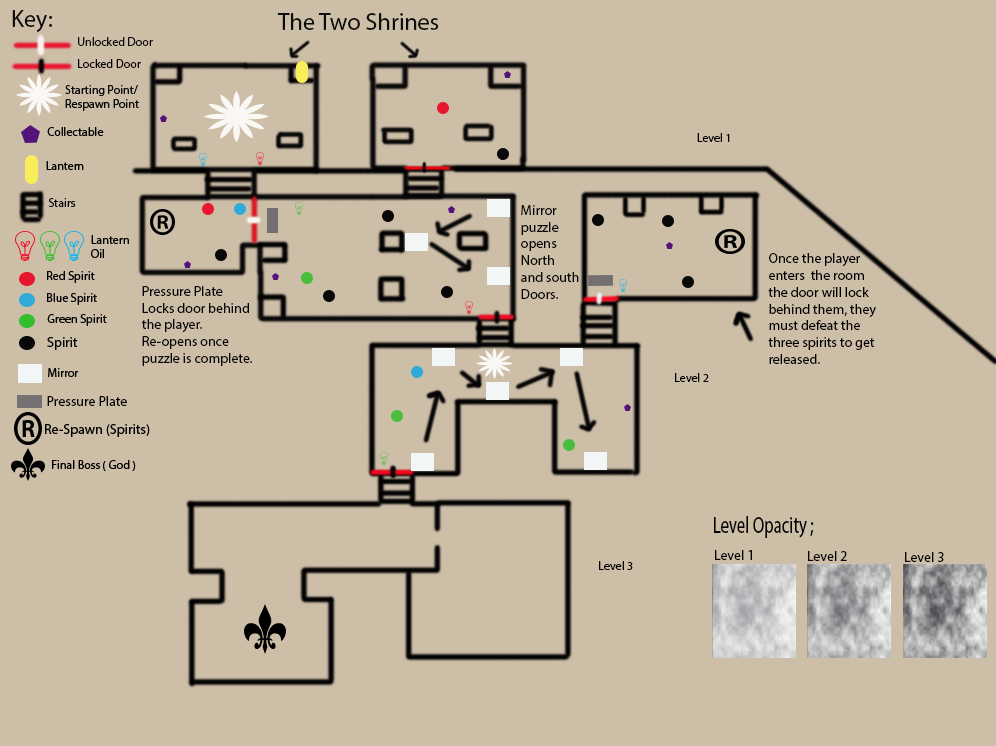
<style>
.page{position:relative;width:996px;height:746px;background:#cdbea8}
.page>*{position:absolute;margin:0}
.t1{font:24px "MyriadPro-Regular";color:#0c0c0c}
.t2{font:12px "MyriadPro-Regular";color:#0c0c0c}
.t3{font:12px "MyriadPro-Regular";color:#040001}
.t4{font:12px "MyriadPro-Regular";color:#000000}
.t5{font:14px "MyriadPro-Regular";color:#040404}
.t6{font:14px "MyriadPro-Regular";color:#000000}
.t7{font:23.2px "MyriadPro-Regular";color:#030303;scale:0.72 1}
.t8{font:14px "MyriadPro-Regular";color:#030303}
</style>
<div class="page">
<p class="t1" style="left:12px;top:10px;width:41px;height:22px">Key:</p>
<p class="t1" style="left:277px;top:13px;width:162px;height:17px">The Two Shrines</p>
<p class="t2" style="left:78px;top:37px;width:75px;height:9px">Unlocked Door</p>
<p class="t3" style="left:78px;top:59px;width:63px;height:9px">Locked Door</p>
<p class="t4" style="left:697px;top:133px;width:33px;height:9px">Level 1</p>
<p class="t3" style="left:48px;top:198px;width:28px;height:9px">Stairs</p>
<p class="t5" style="left:521px;top:205px;width:58px;height:94px">Mirror<br>puzzle <br>opens <br>North <br>and south<br>Doors.</p>
<p class="t6" style="left:768px;top:253px;width:108px;height:111px">Once the player<br>enters  the room <br>the door will lock <br>behind them, they<br>must defeat the <br>three spirits to get<br>released.</p>
<p class="t5" style="left:142px;top:286px;width:110px;height:80px">Pressure Plate<br>Locks door behind<br>the player.<br>Re-opens once<br>puzzle is complete.</p>
<p class="t4" style="left:675px;top:373px;width:34px;height:9px">Level 2</p>
<p class="t6" style="left:47px;top:396px;width:80px;height:10px">Pressure Plate</p>
<p class="t7" style="left:714px;top:516px;width:100px;height:22px">Level Opacity ;</p>
<p class="t8" style="left:715px;top:550px;width:37px;height:10px">Level 1</p>
<p class="t8" style="left:808px;top:551px;width:39px;height:10px">Level 2</p>
<p class="t8" style="left:905px;top:552px;width:39px;height:10px">Level 3</p>
<p class="t4" style="left:599px;top:561px;width:34px;height:9px">Level 3</p>
</div>
